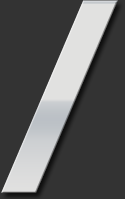
<style>
.page{position:relative;width:125px;height:199px;background:#333333}
.page>*{position:absolute;margin:0}
.t1{font:185.2px "FugazOne-Regular";color:#dfdfdf;scale:0.89 1}
</style>
<div class="page">
<p class="t1" style="left:1px;top:0px;width:117px;height:193px">/</p>
</div>
